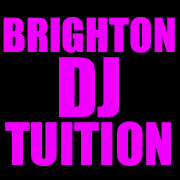
<style>
.page{position:relative;width:180px;height:180px;background:#000000}
.page>*{position:absolute;margin:0}
.t1{font:43.2px/54px "Impact";color:#f000ff}
.t2{font:75.6px/64.8px "Impact";color:#f000ff}
.t3{font:54px/48.6px "Impact";color:#f000ff}
</style>
<div class="page">
<p class="t1" style="left:3px;top:17px;width:172px;height:149px;text-align:center">BRIGHTON<br><span class="t2">DJ<br></span><span class="t3">TUITION</span></p>
</div>
